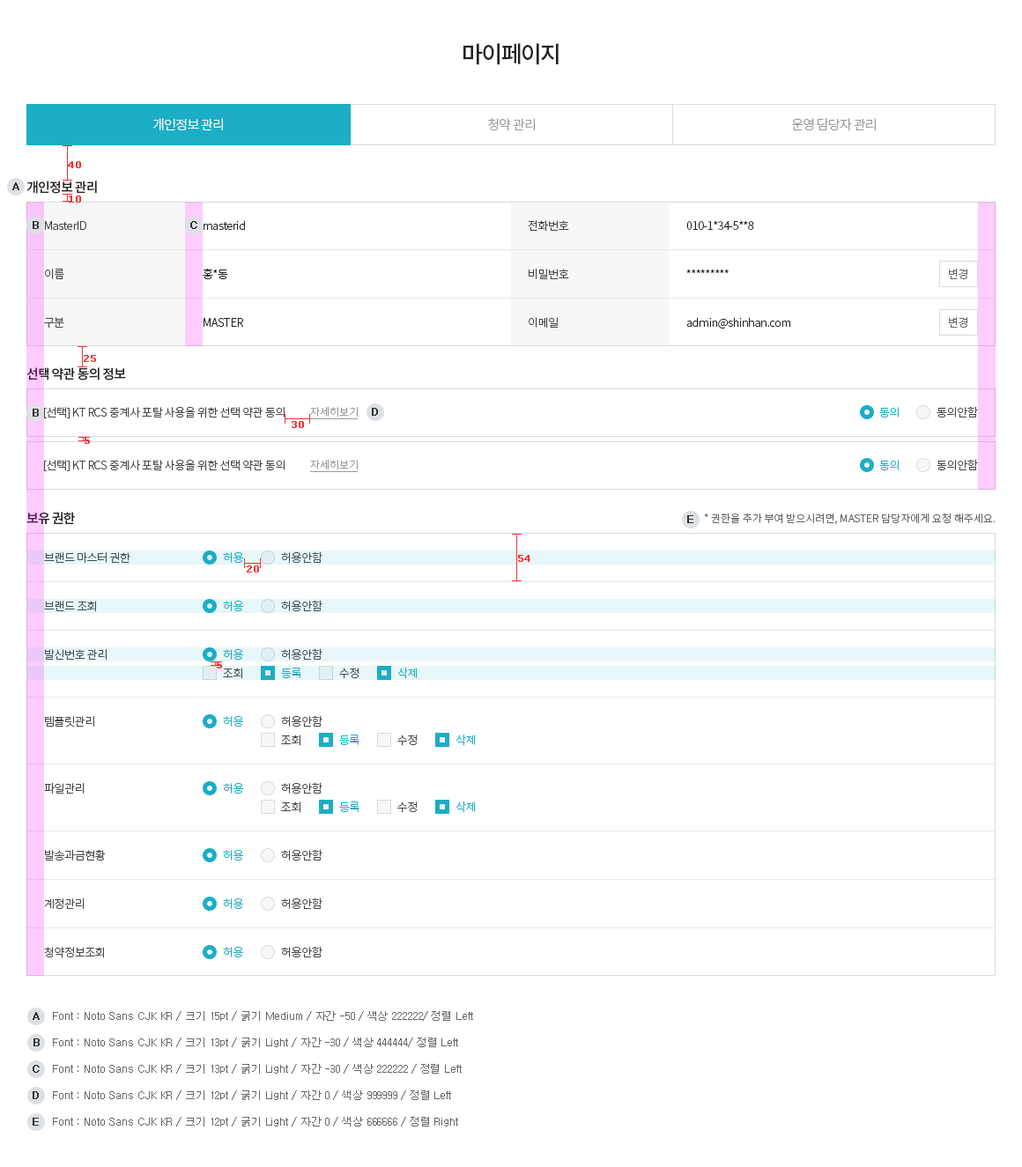
<style>
.page{position:relative;width:1022px;height:1167px;background:#ffffff}
.page>*{position:absolute;margin:0}
.t1{font:22.9px "NotoSansCJKkr-Medium";letter-spacing:-0.075em;color:#222222;text-transform:uppercase}
.t2{font:13.2px "NotoSansCJKkr-Light";letter-spacing:-0.05em;color:#ffffff}
.t3{font:13.2px "NotoSansCJKkr-Light";letter-spacing:-0.05em;color:#999999}
.t4{font:9.7px "Verdana";color:#f83030;font-weight:bold}
.t5{font:13.2px "NotoSansCJKkr-Medium";letter-spacing:-0.05em;color:#222222}
.t6{font:11.5px/48.4px "NotoSansCJKkr-Light";letter-spacing:-0.03em;color:#444444}
.t7{font:11.5px/48.4px "NotoSansCJKkr-Light";letter-spacing:-0.03em;color:#222222}
.t8{font:11.5px "NotoSansCJKkr-Light";letter-spacing:-0.03em;color:#666666}
.t9{font:11.5px "NotoSansCJKkr-Light";letter-spacing:-0.03em;color:#444444}
.t10{font:10.6px "NotoSansCJKkr-Light";color:#999999}
.t11{font:11.5px "NotoSansCJKkr-Light";letter-spacing:-0.03em;color:#1baec5}
.t12{font:13.2px "NotoSansCJKkr-Medium";letter-spacing:-0.05em}
.t13{font:10.6px "NotoSansCJKkr-Light";color:#666666}
.t14{font:11.5px/66.9px "NotoSansCJKkr-Light";letter-spacing:-0.03em;color:#444444}
.t15{font:10.6px "Dotum";color:#323232;font-weight:bold}
.t16{font:10.6px "Dotum";color:#666666}
.t17{font:10.6px "Dotum";color:#323232;text-transform:uppercase;font-weight:bold}
</style>
<div class="page">
<p class="t1" style="left:463px;top:43px;width:95px;height:22px">마이페이지</p>
<p class="t2" style="left:153px;top:118px;width:70px;height:12px">개인정보 관리</p>
<p class="t3" style="left:488px;top:118px;width:47px;height:12px">청약 관리</p>
<p class="t3" style="left:792px;top:118px;width:84px;height:12px">운영 담당자 관리</p>
<p class="t4" style="left:68px;top:161px;width:13px;height:7px">40</p>
<p class="t5" style="left:26px;top:181px;width:71px;height:13px">개인정보 관리</p>
<p class="t4" style="left:69px;top:196px;width:12px;height:7px">10</p>
<p class="t6" style="left:44px;top:221px;width:42px;height:108px">MasterID<br>이름<br>구분</p>
<p class="t7" style="left:203px;top:220px;width:42px;height:107px">masterid<br>홍*동<br>MASTER</p>
<p class="t6" style="left:528px;top:220px;width:41px;height:109px">전화번호<br>비밀번호<br>이메일</p>
<p class="t7" style="left:686px;top:221px;width:105px;height:108px">010-1*34-5**8    <br>*********<br>admin@shinhan.com</p>
<p class="t8" style="left:949px;top:268px;width:18px;height:11px">변경</p>
<p class="t8" style="left:949px;top:316px;width:18px;height:12px">변경</p>
<p class="t4" style="left:84px;top:355px;width:12px;height:7px">25</p>
<p class="t5" style="left:26px;top:367px;width:100px;height:14px">선택 약관 동의 정보</p>
<p class="t9" style="left:44px;top:407px;width:241px;height:11px">[선택] KT RCS 중계사 포탈 사용을 위한 선택 약관 동의</p>
<p class="t10" style="left:310px;top:407px;width:48px;height:11px">자세히보기</p>
<p class="t11" style="left:879px;top:407px;width:19px;height:11px">동의</p>
<p class="t9" style="left:936px;top:406px;width:42px;height:12px">동의안함</p>
<p class="t4" style="left:292px;top:421px;width:12px;height:7px">30</p>
<p class="t4" style="left:85px;top:437px;width:5px;height:7px">5</p>
<p class="t9" style="left:44px;top:460px;width:241px;height:11px">[선택] KT RCS 중계사 포탈 사용을 위한 선택 약관 동의</p>
<p class="t10" style="left:310px;top:460px;width:48px;height:10px">자세히보기</p>
<p class="t11" style="left:879px;top:460px;width:19px;height:10px">동의</p>
<p class="t9" style="left:936px;top:459px;width:42px;height:11px">동의안함</p>
<p class="t12" style="left:26px;top:512px;width:49px;height:13px">보유 권한</p>
<p class="t13" style="left:704px;top:513px;width:291px;height:11px">* 권한을 추가 부여 받으시려면, MASTER 담당자에게 요청 해주세요.</p>
<p class="t6" style="left:44px;top:551px;width:86px;height:109px">브랜드 마스터 권한<br>브랜드 조회<br>발신번호 관리</p>
<p class="t11" style="left:223px;top:552px;width:21px;height:11px">허용</p>
<p class="t9" style="left:281px;top:551px;width:41px;height:12px">허용안함</p>
<p class="t4" style="left:518px;top:555px;width:12px;height:7px">54</p>
<p class="t4" style="left:247px;top:565px;width:12px;height:8px">20</p>
<p class="t11" style="left:223px;top:601px;width:21px;height:10px">허용</p>
<p class="t9" style="left:281px;top:600px;width:41px;height:11px">허용안함</p>
<p class="t11" style="left:223px;top:649px;width:21px;height:11px">허용</p>
<p class="t9" style="left:281px;top:648px;width:41px;height:12px">허용안함</p>
<p class="t4" style="left:217px;top:661px;width:5px;height:8px">5</p>
<p class="t9" style="left:223px;top:668px;width:19px;height:11px">조회</p>
<p class="t11" style="left:281px;top:668px;width:20px;height:10px">등록</p>
<p class="t9" style="left:339px;top:668px;width:19px;height:11px">수정</p>
<p class="t11" style="left:398px;top:667px;width:20px;height:12px">삭제</p>
<p class="t14" style="left:44px;top:716px;width:50px;height:78px">템플릿관리<br>파일관리</p>
<p class="t11" style="left:223px;top:716px;width:21px;height:11px">허용</p>
<p class="t9" style="left:281px;top:715px;width:41px;height:12px">허용안함</p>
<p class="t9" style="left:281px;top:735px;width:19px;height:11px">조회</p>
<p class="t11" style="left:339px;top:735px;width:20px;height:10px">등록</p>
<p class="t9" style="left:397px;top:735px;width:20px;height:11px">수정</p>
<p class="t11" style="left:456px;top:734px;width:20px;height:12px">삭제</p>
<p class="t11" style="left:223px;top:783px;width:21px;height:11px">허용</p>
<p class="t9" style="left:281px;top:782px;width:41px;height:12px">허용안함</p>
<p class="t9" style="left:281px;top:802px;width:19px;height:11px">조회</p>
<p class="t11" style="left:339px;top:802px;width:20px;height:10px">등록</p>
<p class="t9" style="left:397px;top:802px;width:20px;height:11px">수정</p>
<p class="t11" style="left:456px;top:801px;width:20px;height:12px">삭제</p>
<p class="t6" style="left:44px;top:849px;width:61px;height:109px">발송과금현황<br>계정관리<br>청약정보조회</p>
<p class="t11" style="left:223px;top:850px;width:21px;height:11px">허용</p>
<p class="t9" style="left:281px;top:849px;width:41px;height:12px">허용안함</p>
<p class="t11" style="left:223px;top:898px;width:21px;height:11px">허용</p>
<p class="t9" style="left:281px;top:898px;width:41px;height:11px">허용안함</p>
<p class="t11" style="left:223px;top:947px;width:21px;height:10px">허용</p>
<p class="t9" style="left:281px;top:946px;width:41px;height:11px">허용안함</p>
<p class="t15" style="left:33px;top:1012px;width:7px;height:8px">A</p>
<p class="t16" style="left:53px;top:1011px;width:420px;height:10px">Font : Noto Sans CJK KR / 크기 15pt / 굵기 Medium / 자간 -50 / 색상 222222/ 정렬 Left</p>
<p class="t16" style="left:53px;top:1038px;width:405px;height:9px">Font : Noto Sans CJK KR / 크기 13pt / 굵기 Light / 자간 -30 / 색상 444444/ 정렬 Left</p>
<p class="t15" style="left:33px;top:1038px;width:7px;height:8px">B</p>
<p class="t17" style="left:33px;top:1065px;width:7px;height:8px">c</p>
<p class="t16" style="left:53px;top:1064px;width:409px;height:10px">Font : Noto Sans CJK KR / 크기 13pt / 굵기 Light / 자간 -30 / 색상 222222 / 정렬 Left</p>
<p class="t17" style="left:33px;top:1091px;width:6px;height:8px">d</p>
<p class="t16" style="left:53px;top:1090px;width:398px;height:10px">Font : Noto Sans CJK KR / 크기 12pt / 굵기 Light / 자간 0 / 색상 999999 / 정렬 Left</p>
<p class="t17" style="left:33px;top:1118px;width:6px;height:8px">e</p>
<p class="t16" style="left:53px;top:1117px;width:405px;height:10px">Font : Noto Sans CJK KR / 크기 12pt / 굵기 Light / 자간 0 / 색상 666666 / 정렬 Right</p>
</div>
